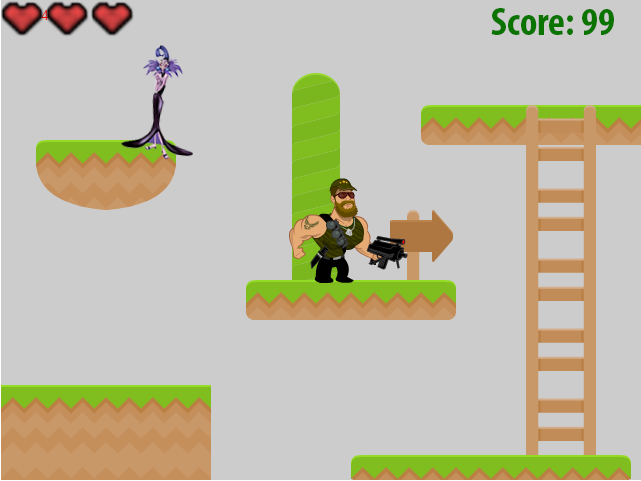
<style>
.page{position:relative;width:641px;height:481px;background:#cccccc}
.page>*{position:absolute;margin:0}
.t1{font:40px "MyriadPro-BoldCond";color:#0b7400}
</style>
<div class="page">
<p class="t1" style="left:491px;top:8px;width:123px;height:27px">Score: 99</p>
</div>
